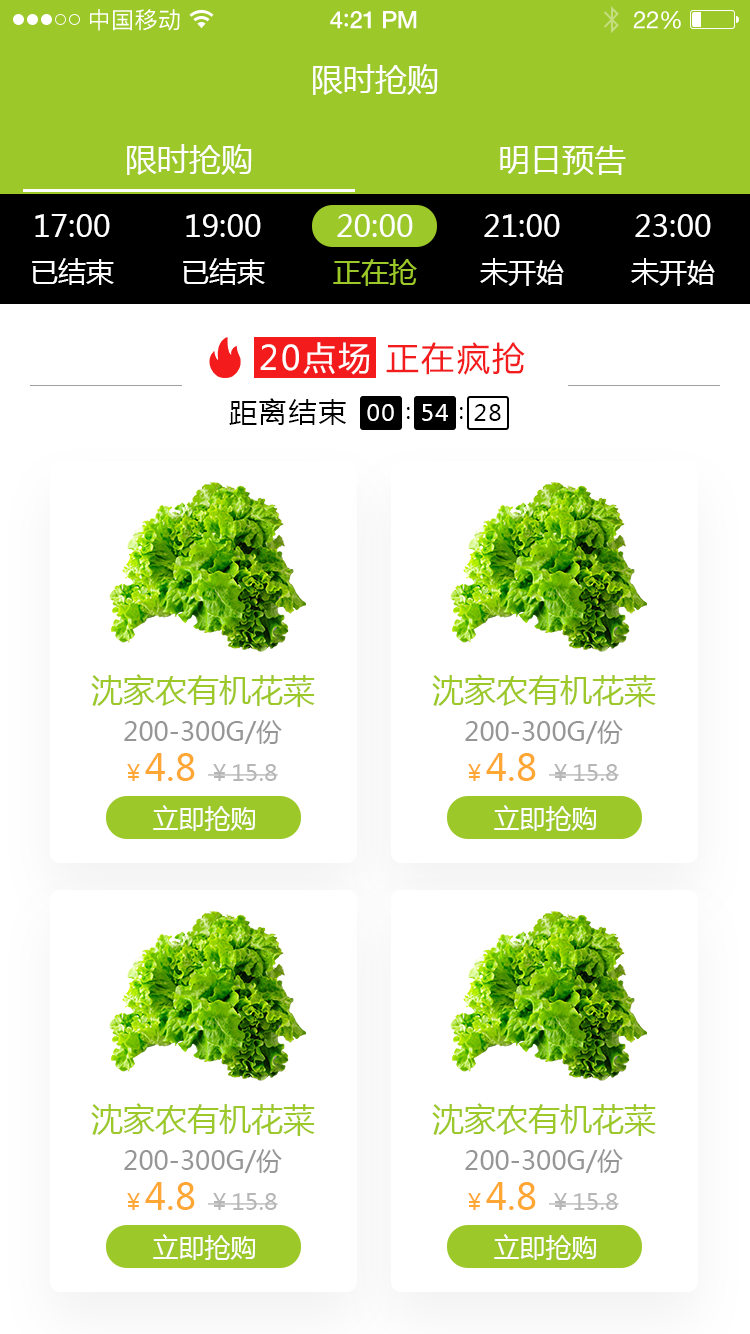
<style>
.page{position:relative;width:750px;height:1334px;background:#ffffff}
.page>*{position:absolute;margin:0}
.t1{font:23px "PingFangSC-Regular";letter-spacing:0.02em;color:#ffffff}
.t2{font:24px "HelveticaNeue-Medium";letter-spacing:-0.02em;color:#ffffff}
.t3{font:26px "Avenir-Medium";letter-spacing:-0.02em;color:#ffffff}
.t4{font:24px "HelveticaNeue";letter-spacing:-0.02em;color:#ffffff}
.t5{font:32px "MicrosoftYaHei";color:#ffffff;text-transform:uppercase}
.t6{font:30px "MicrosoftYaHei";color:#ffffff}
.t7{font:28px "MicrosoftYaHei";color:#ffffff}
.t8{font:28px "MicrosoftYaHei";color:#9cc829}
.t9{font:26.8px "MicrosoftYaHei";letter-spacing:0.05em;color:#000000;scale:1.06 1}
.t10{font:22px "MicrosoftYaHei";letter-spacing:0.05em;color:#ffffff;scale:1.06 1}
.t11{font:22px "MicrosoftYaHei";letter-spacing:0.05em;color:#000000;scale:1.06 1}
.t12{font:32px "MicrosoftYaHei";color:#9cc829;text-transform:uppercase}
.t13{font:26px "MicrosoftYaHei";color:#969696;text-transform:uppercase}
.t14{font:35.7px "MicrosoftYaHei";color:#ffa734;text-transform:uppercase}
.t15{font:23.2px "MicrosoftYaHei";color:#ffa734;text-transform:uppercase}
.t16{font:23.2px "MicrosoftYaHei";color:#b6b6b6;text-transform:uppercase}
.t17{font:26px "MicrosoftYaHei";color:#ffffff;text-transform:uppercase}
</style>
<div class="page">
<p class="t1" style="left:90px;top:9px;width:90px;height:22px">中国移动</p>
<p class="t2" style="left:330px;top:11px;width:87px;height:18px">4<span class="t3">:</span>21 PM</p>
<p class="t4" style="left:633px;top:11px;width:48px;height:18px">22%</p>
<p class="t5" style="left:313px;top:64px;width:125px;height:31px">限时抢购</p>
<p class="t5" style="left:127px;top:144px;width:125px;height:31px">限时抢购</p>
<p class="t5" style="left:500px;top:145px;width:126px;height:30px">明日预告</p>
<p class="t6" style="left:35px;top:214px;width:75px;height:23px">17:00</p>
<p class="t6" style="left:186px;top:214px;width:75px;height:23px">19:00</p>
<p class="t6" style="left:337px;top:214px;width:76px;height:23px">20:00</p>
<p class="t6" style="left:484px;top:214px;width:76px;height:23px">21:00</p>
<p class="t6" style="left:635px;top:214px;width:76px;height:23px">23:00</p>
<p class="t7" style="left:32px;top:258px;width:82px;height:27px">已结束</p>
<p class="t7" style="left:183px;top:258px;width:82px;height:27px">已结束</p>
<p class="t8" style="left:333px;top:259px;width:84px;height:27px">正在抢</p>
<p class="t7" style="left:480px;top:258px;width:84px;height:28px">未开始</p>
<p class="t7" style="left:631px;top:258px;width:84px;height:28px">未开始</p>
<p class="t9" style="left:229px;top:398px;width:117px;height:27px">距离结束</p>
<p class="t10" style="left:367px;top:404px;width:27px;height:17px">00</p>
<p class="t11" style="left:406px;top:407px;width:4px;height:12px">：</p>
<p class="t10" style="left:422px;top:404px;width:26px;height:17px">54</p>
<p class="t11" style="left:459px;top:407px;width:4px;height:12px">：</p>
<p class="t11" style="left:474px;top:404px;width:27px;height:17px">28</p>
<p class="t12" style="left:91px;top:674px;width:224px;height:33px">沈家农有机花菜</p>
<p class="t12" style="left:432px;top:674px;width:224px;height:33px">沈家农有机花菜</p>
<p class="t13" style="left:124px;top:720px;width:158px;height:24px">200-300g/份</p>
<p class="t13" style="left:465px;top:720px;width:158px;height:24px">200-300g/份</p>
<p class="t14" style="left:127px;top:753px;width:68px;height:28px"><span class="t15">￥</span>4.8</p>
<p class="t14" style="left:468px;top:753px;width:68px;height:28px"><span class="t15">￥</span>4.8</p>
<p class="t16" style="left:208px;top:764px;width:70px;height:17px">￥15.8</p>
<p class="t16" style="left:549px;top:764px;width:70px;height:17px">￥15.8</p>
<p class="t17" style="left:153px;top:805px;width:102px;height:26px">立即抢购</p>
<p class="t17" style="left:494px;top:805px;width:102px;height:26px">立即抢购</p>
<p class="t12" style="left:91px;top:1103px;width:224px;height:33px">沈家农有机花菜</p>
<p class="t12" style="left:432px;top:1103px;width:224px;height:33px">沈家农有机花菜</p>
<p class="t13" style="left:124px;top:1149px;width:158px;height:24px">200-300g/份</p>
<p class="t13" style="left:465px;top:1149px;width:158px;height:24px">200-300g/份</p>
<p class="t14" style="left:127px;top:1182px;width:68px;height:28px"><span class="t15">￥</span>4.8</p>
<p class="t14" style="left:468px;top:1182px;width:68px;height:28px"><span class="t15">￥</span>4.8</p>
<p class="t16" style="left:208px;top:1193px;width:70px;height:17px">￥15.8</p>
<p class="t16" style="left:549px;top:1193px;width:70px;height:17px">￥15.8</p>
<p class="t17" style="left:153px;top:1234px;width:102px;height:26px">立即抢购</p>
<p class="t17" style="left:494px;top:1234px;width:102px;height:26px">立即抢购</p>
</div>
